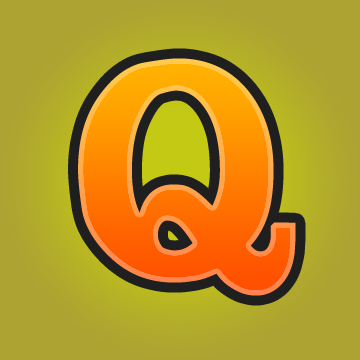
<style>
.page{position:relative;width:360px;height:360px;background:#ada332}
.page>*{position:absolute;margin:0}
.t1{font:285.6px "Clarendon-Bold";font-weight:bold;scale:0.81 1}
</style>
<div class="page">
<p class="t1" style="left:78px;top:58px;width:218px;height:238px">Q</p>
</div>
